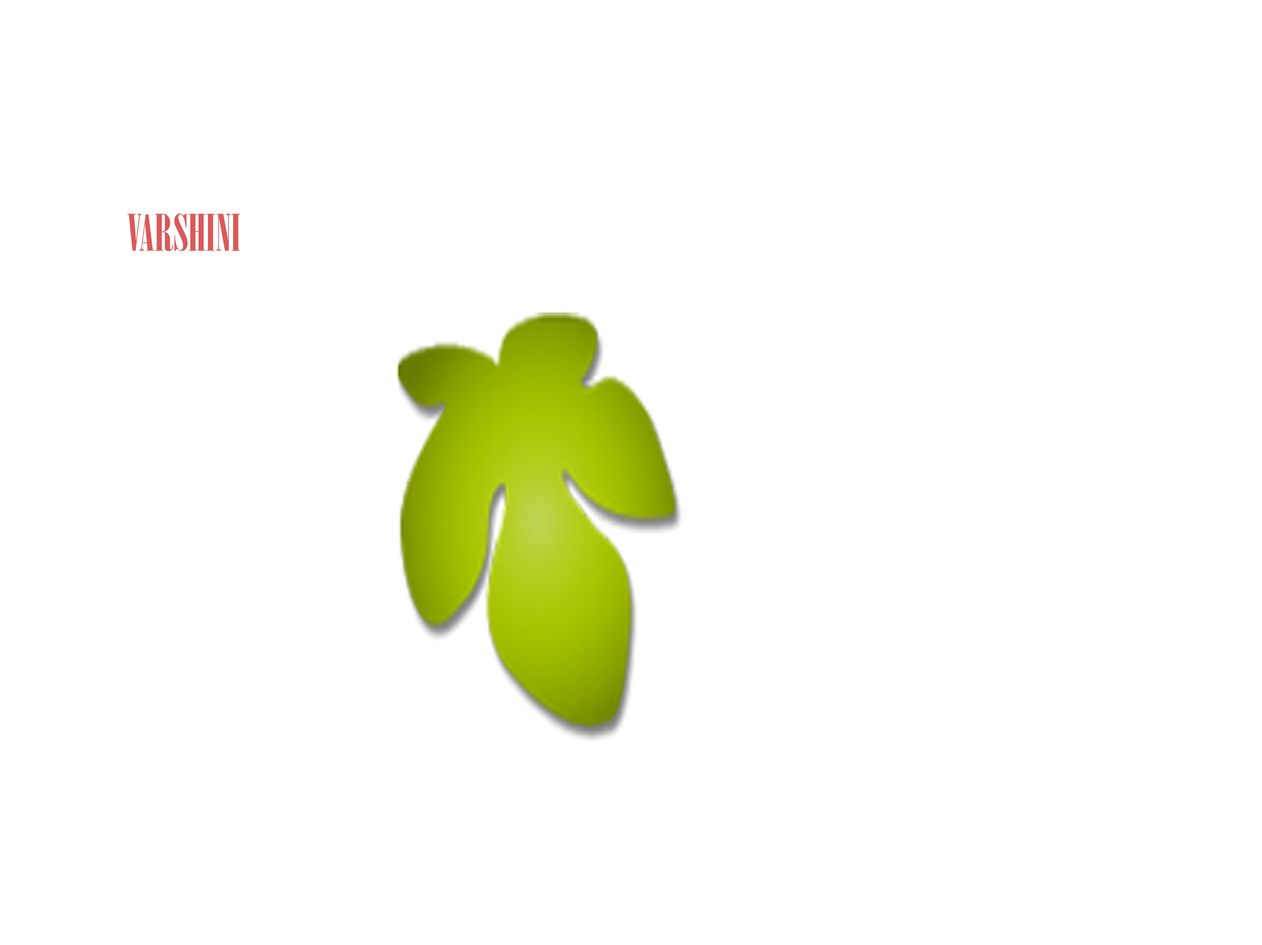
<style>
.page{position:relative;width:1262px;height:945px;background:#ffffff}
.page>*{position:absolute;margin:0}
.t1{font:50px "Onyx";color:#db5858}
</style>
<div class="page">
<p class="t1" style="left:127px;top:213px;width:113px;height:38px">VARSHINI</p>
</div>
